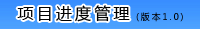
<style>
.page{position:relative;width:200px;height:30px}
.page>*{position:absolute;margin:0}
.t1{font:16px "MicrosoftYaHei";letter-spacing:0.2em;color:#000000}
.t2{font:9px "MicrosoftYaHei";letter-spacing:0.2em;color:#000000}
</style>
<div class="page">
<p class="t1" style="left:17px;top:5px;width:113px;height:17px">项目进度管理</p>
<p class="t2" style="left:136px;top:12px;width:47px;height:10px">(版本1.0)</p>
</div>
